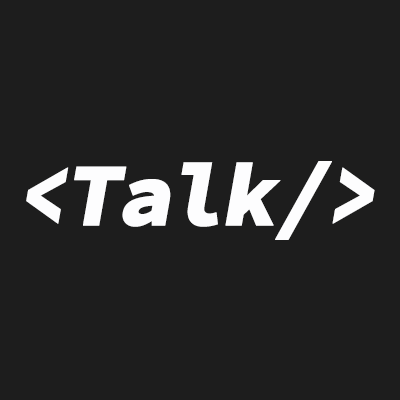
<style>
.page{position:relative;width:400px;height:400px;background:#1d1d1d}
.page>*{position:absolute;margin:0}
.t1{font:90px "SauceCodePowerline-Black";letter-spacing:-0.05em;color:#fdfdfe;font-weight:bold;font-style:italic}
</style>
<div class="page">
<p class="t1" style="left:26px;top:161px;width:349px;height:79px">&lt;Talk/&gt;</p>
</div>
